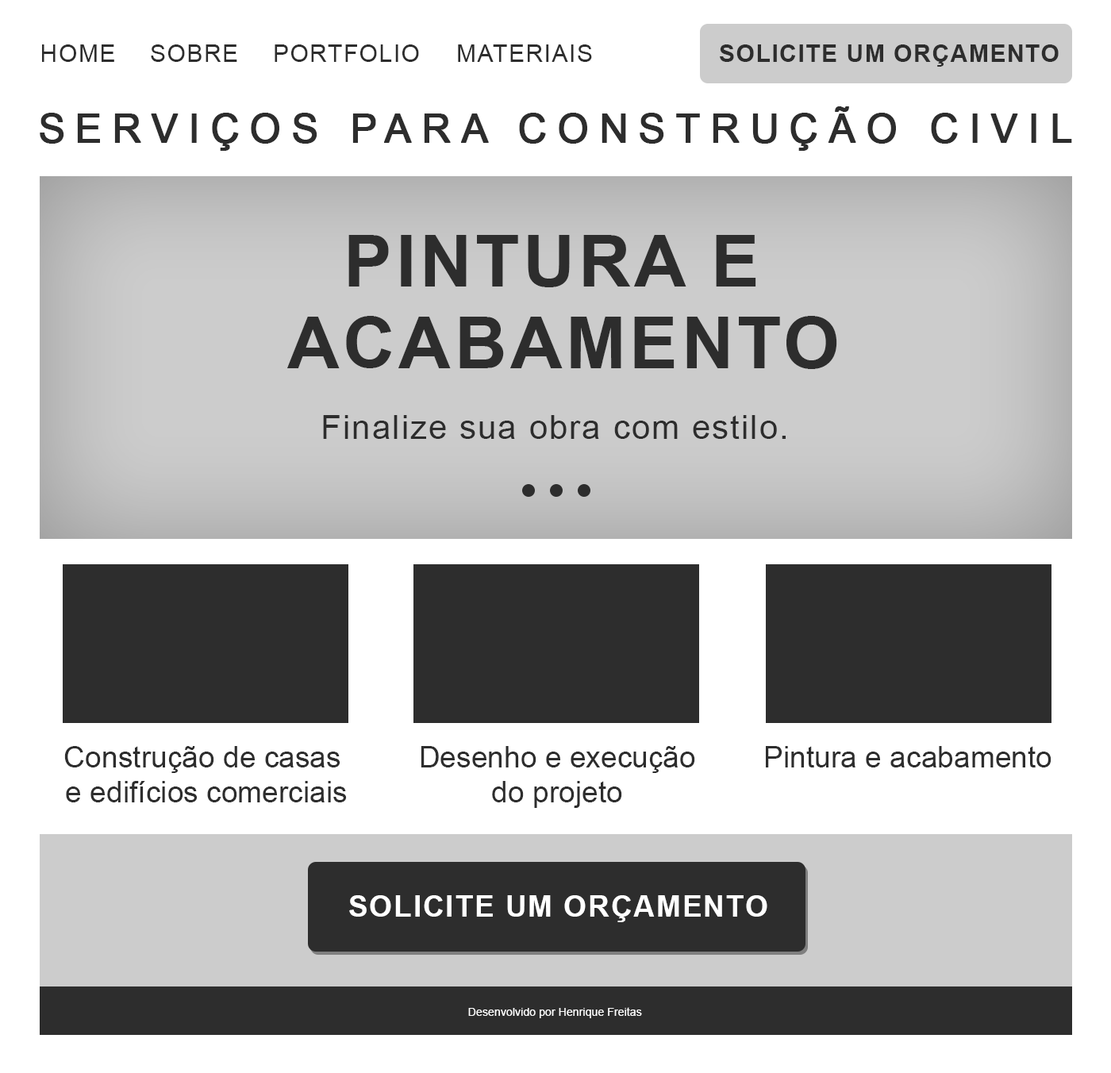
<style>
.page{position:relative;width:1111px;height:1073px;background:#ffffff}
.page>*{position:absolute;margin:0}
.t1{font:23.6px "ArialMT";letter-spacing:0.05em;color:#2d2d2d;text-transform:uppercase}
.t2{font:23.6px "Arial-BoldMT";letter-spacing:0.05em;color:#2d2d2d;text-transform:uppercase}
.t3{font:39.4px "ArialMT";letter-spacing:0.25em;color:#2d2d2d;text-transform:uppercase;font-weight:bold}
.t4{font:72.2px/81.6px "Arial-BoldMT";letter-spacing:0.05em;color:#2d2d2d;text-transform:uppercase}
.t5{font:33.2px "ArialMT";letter-spacing:0.05em;color:#2d2d2d}
.t6{font:29.5px "ArialMT";color:#2d2d2d}
.t7{font:29.4px "Arial-BoldMT";letter-spacing:0.05em;color:#fefefe;text-transform:uppercase}
.t8{font:11.3px "ArialMT";color:#ffffff}
</style>
<div class="page">
<p class="t1" style="left:42px;top:44px;width:72px;height:18px">Home</p>
<p class="t1" style="left:151px;top:44px;width:86px;height:18px">Sobre</p>
<p class="t1" style="left:275px;top:44px;width:144px;height:18px">Portfolio</p>
<p class="t1" style="left:458px;top:44px;width:134px;height:18px">Materiais</p>
<p class="t2" style="left:720px;top:44px;width:339px;height:23px">Solicite um orçamento</p>
<p class="t3" style="left:40px;top:106px;width:1032px;height:45px">Serviços para construção civil</p>
<p class="t4" style="left:287px;top:235px;width:550px;height:134px;text-align:center">Pintura e <br>acabamento</p>
<p class="t5" style="left:323px;top:415px;width:463px;height:24px">Finalize sua obra com estilo.</p>
<p class="t6" style="left:64px;top:746px;width:283px;height:56px;text-align:center">Construção de casas <br>e edifícios comerciais</p>
<p class="t6" style="left:421px;top:746px;width:274px;height:62px;text-align:center">Desenho e execução<br>do projeto</p>
<p class="t6" style="left:766px;top:746px;width:286px;height:22px">Pintura e acabamento</p>
<p class="t7" style="left:349px;top:895px;width:419px;height:27px">Solicite um orçamento</p>
<p class="t8" style="left:468px;top:1007px;width:174px;height:11px">Desenvolvido por Henrique Freitas</p>
</div>
